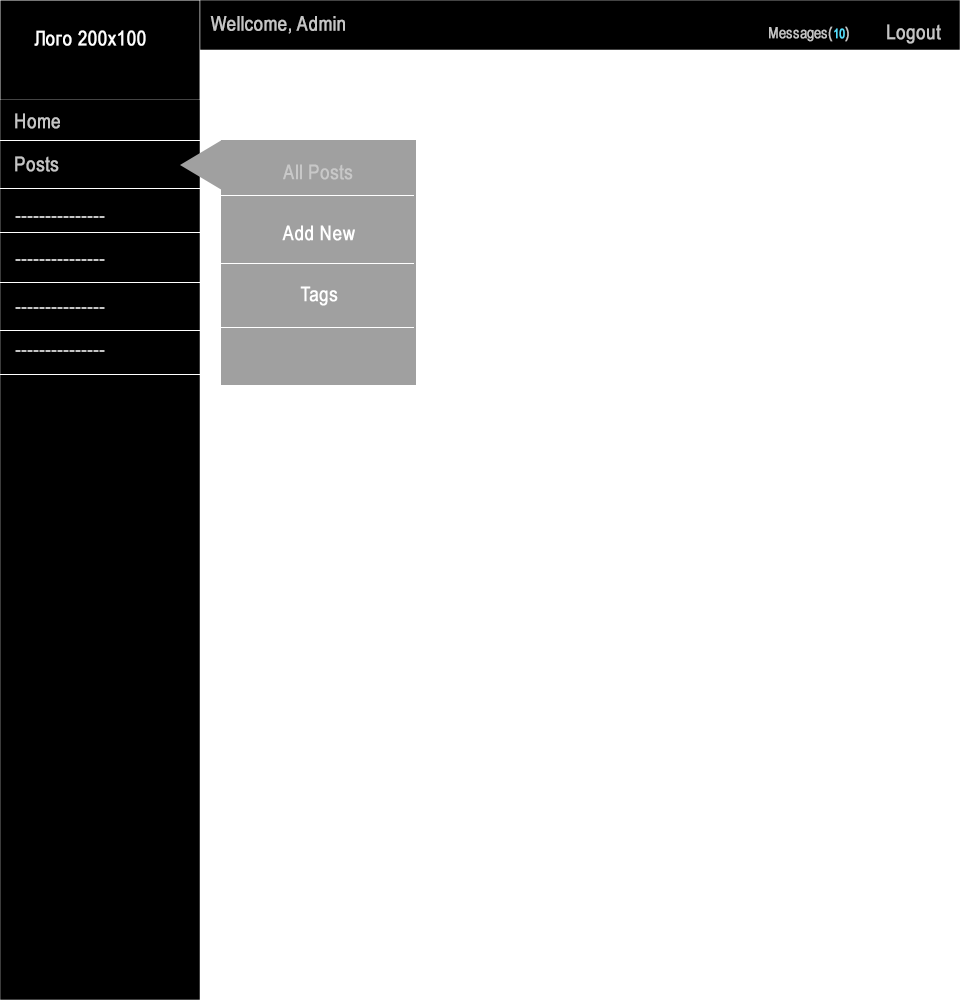
<style>
.page{position:relative;width:960px;height:1000px;background:#ffffff}
.page>*{position:absolute;margin:0}
.t1{font:20.3px "ArialNarrow";color:#c5c5c5;font-weight:bold}
.t2{font:20.3px "ArialNarrow";color:#ffffff;font-weight:bold}
.t3{font:20.3px "ArialNarrow";color:#000000;font-weight:bold}
.t4{font:15.2px "ArialNarrow";color:#c5c5c5;font-weight:bold}
.t5{font:12.7px "ArialNarrow";color:#56e1ff;font-weight:bold}
.t6{font:20.3px/30.5px "ArialNarrow";color:#ffffff;font-weight:bold}
.t7{font:20.3px/30.5px "ArialNarrow";color:#c8c8c8;font-weight:bold}
</style>
<div class="page">
<p class="t1" style="left:210px;top:16px;width:135px;height:18px">Wellcome, Admin</p>
<p class="t2" style="left:34px;top:30px;width:132px;height:20px"><span class="t3"><br></span>Лого 200х100<span class="t3">px</span></p>
<p class="t4" style="left:769px;top:26px;width:80px;height:16px">Messages(<span class="t5">10</span>)</p>
<p class="t1" style="left:887px;top:24px;width:54px;height:20px">Logout</p>
<p class="t1" style="left:15px;top:113px;width:45px;height:16px">Home</p>
<p class="t1" style="left:15px;top:156px;width:44px;height:16px">Posts</p>
<p class="t6" style="left:282px;top:164px;width:73px;height:142px;text-align:center"><span class="t7">All Posts</span> <br><br>Add New<br><br>Tags</p>
</div>
